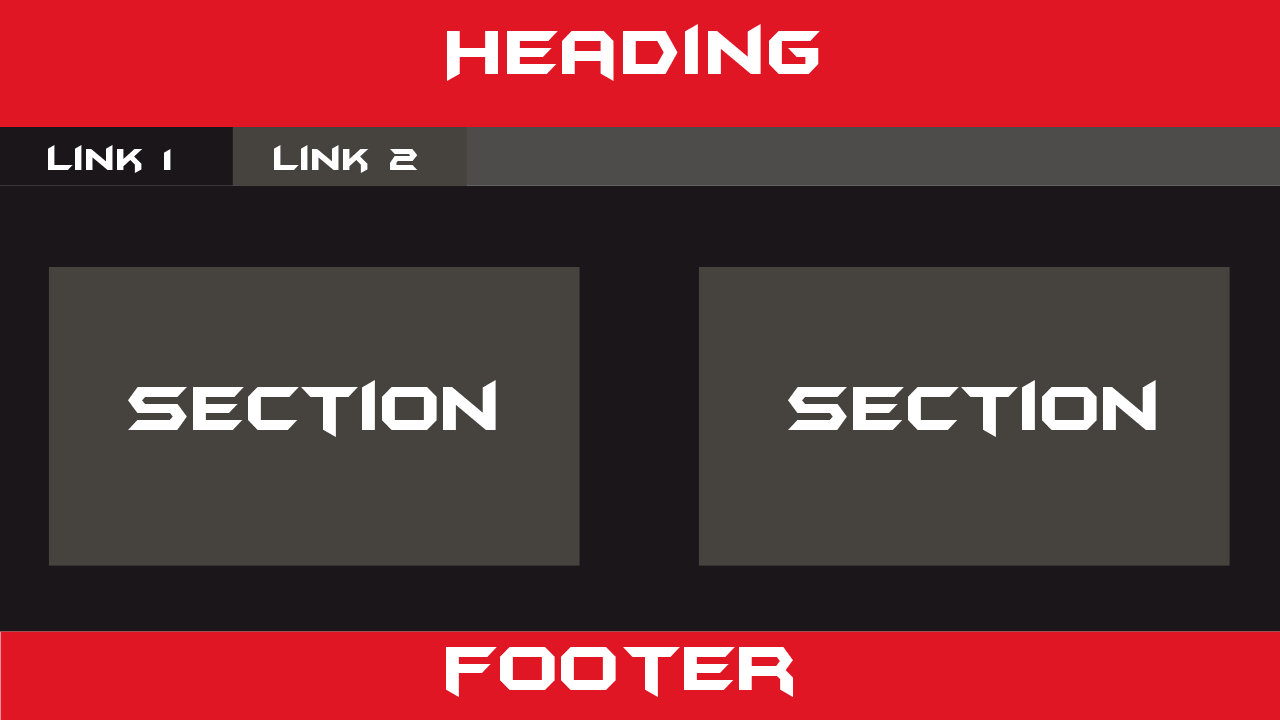
<style>
.page{position:relative;width:1280px;height:720px;background:#46433f}
.page>*{position:absolute;margin:0}
.t1{font:72px "BatmanForeverAlternate";color:#ffffff}
.t2{font:36px "BatmanForeverAlternate";color:#ffffff}
</style>
<div class="page">
<p class="t1" style="left:447px;top:24px;width:373px;height:57px">Heading</p>
<p class="t2" style="left:48px;top:145px;width:123px;height:28px">Link 1</p>
<p class="t2" style="left:274px;top:145px;width:144px;height:28px">Link 2</p>
<p class="t1" style="left:128px;top:380px;width:368px;height:57px">Section</p>
<p class="t1" style="left:788px;top:380px;width:368px;height:57px">Section</p>
<p class="t1" style="left:446px;top:647px;width:347px;height:50px">footer</p>
</div>
